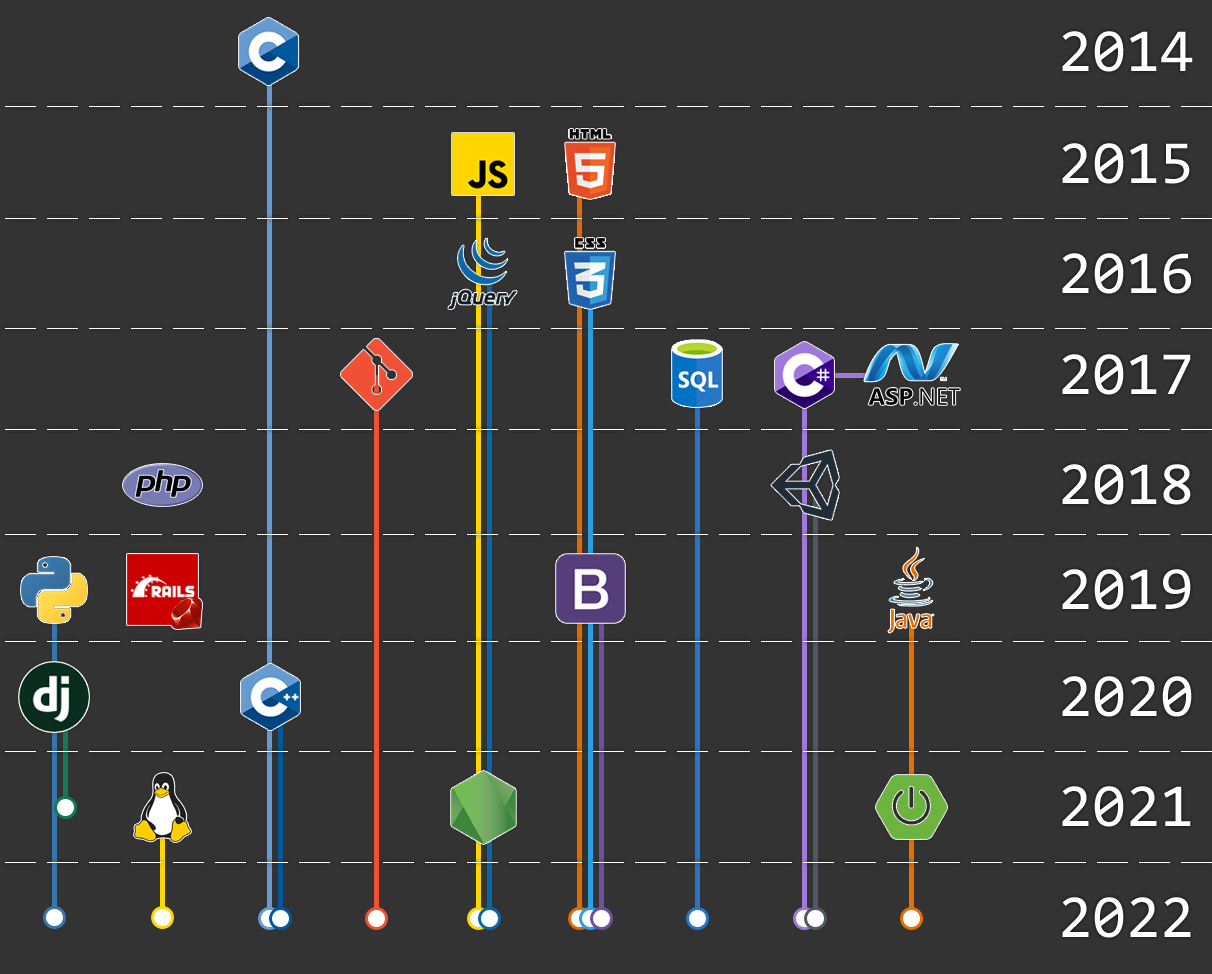
<style>
.page{position:relative;width:1212px;height:974px;background:#333333}
.page>*{position:absolute;margin:0}
.t1{font:61.5px "Consolas";color:#ffffff}
</style>
<div class="page">
<p class="t1" style="left:1062px;top:31px;width:131px;height:41px">2014</p>
<p class="t1" style="left:1062px;top:143px;width:128px;height:41px">2015</p>
<p class="t1" style="left:1062px;top:253px;width:129px;height:41px">2016</p>
<p class="t1" style="left:1062px;top:354px;width:129px;height:41px">2017</p>
<p class="t1" style="left:1062px;top:464px;width:129px;height:41px">2018</p>
<p class="t1" style="left:1062px;top:569px;width:129px;height:41px">2019</p>
<p class="t1" style="left:1062px;top:676px;width:130px;height:41px">2020</p>
<p class="t1" style="left:1062px;top:786px;width:129px;height:41px">2021</p>
<p class="t1" style="left:1062px;top:897px;width:129px;height:41px">2022</p>
</div>
